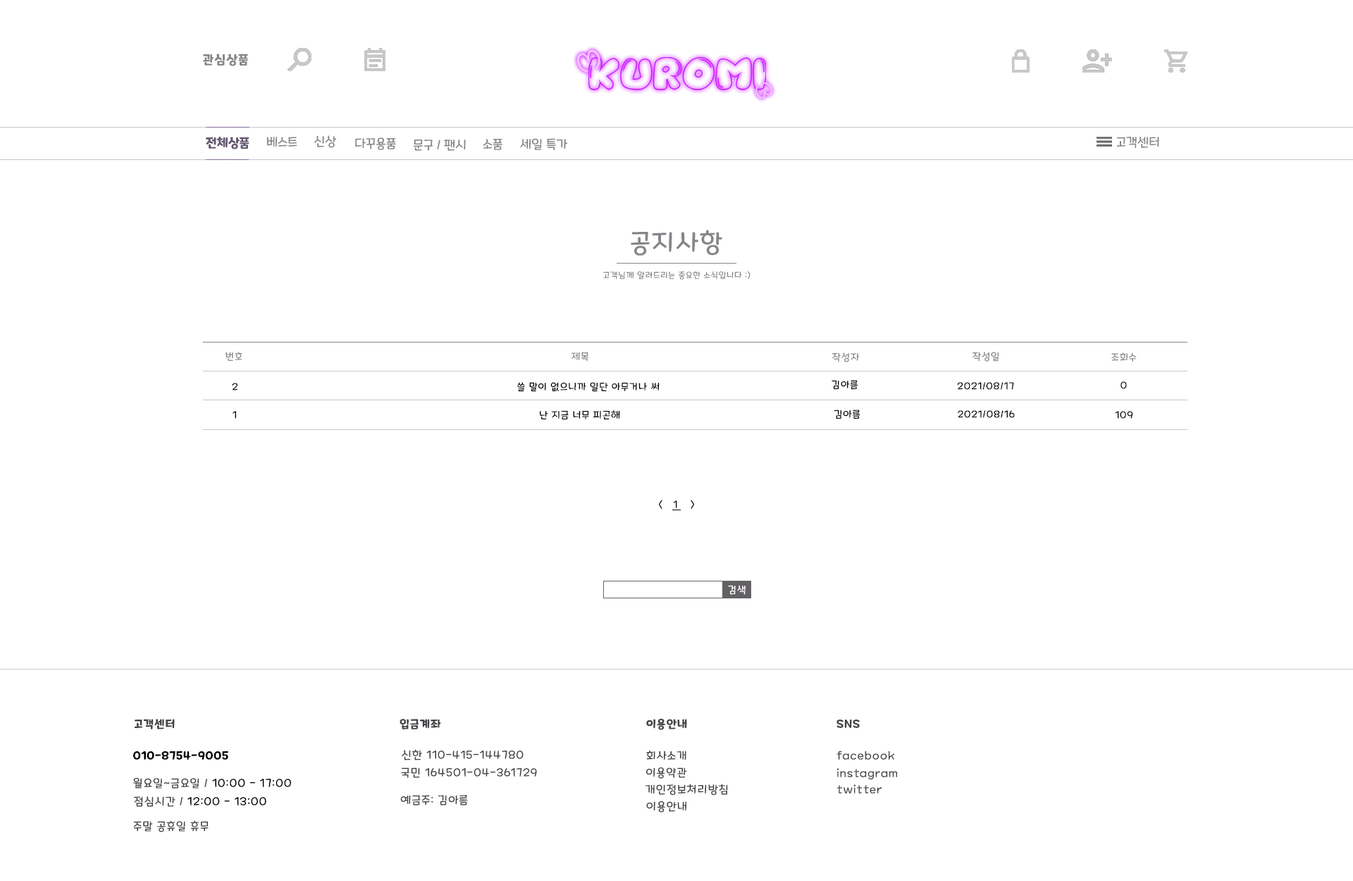
<style>
.page{position:relative;width:1353px;height:881px;background:#ffffff}
.page>*{position:absolute;margin:0}
.t1{font:12.7px "MaplestoryBold";letter-spacing:0.06em;color:#878589}
.t2{font:12.7px "MaplestoryBold";color:#645772}
.t3{font:12.7px "MaplestoryLight";color:#878589}
.t4{font:25.4px "MaplestoryLight";letter-spacing:0.06em;color:#878589}
.t5{font:8.5px "MaplestoryLight";letter-spacing:0.06em;color:#878589}
.t6{font:9.9px "MaplestoryLight";letter-spacing:0.06em;color:#878589}
.t7{font:9.9px "MaplestoryLight";letter-spacing:0.06em;color:#000000}
.t8{font:9.9px "MaplestoryLight";letter-spacing:0.06em;color:#ffffff}
.t9{font:11.3px "MaplestoryBold";letter-spacing:0.06em;color:#464348}
.t10{font:11.3px "MaplestoryLight";letter-spacing:0.06em;color:#464348}
.t11{font:11.3px "MaplestoryBold";letter-spacing:0.06em;color:#000000}
.t12{font:11.3px "MaplestoryLight";letter-spacing:0.06em;color:#000000}
</style>
<div class="page">
<p class="t1" style="left:203px;top:54px;width:45px;height:12px">관심상품</p>
<p class="t2" style="left:206px;top:137px;width:44px;height:12px">전체상품</p>
<p class="t3" style="left:266px;top:137px;width:31px;height:10px">베스트</p>
<p class="t3" style="left:314px;top:135px;width:22px;height:13px">신상</p>
<p class="t3" style="left:355px;top:137px;width:41px;height:13px">다꾸용품</p>
<p class="t3" style="left:1117px;top:137px;width:43px;height:11px">고객센터</p>
<p class="t3" style="left:414px;top:140px;width:52px;height:11px">문구 / 팬시</p>
<p class="t3" style="left:483px;top:139px;width:20px;height:11px">소품</p>
<p class="t3" style="left:520px;top:138px;width:47px;height:12px">세일 특가</p>
<p class="t4" style="left:631px;top:230px;width:91px;height:26px">공지사항</p>
<p class="t5" style="left:603px;top:271px;width:148px;height:9px">고객님께 알려드리는 중요한 소식입니다 :)</p>
<p class="t6" style="left:226px;top:352px;width:16px;height:9px">번호</p>
<p class="t6" style="left:572px;top:352px;width:17px;height:10px">제목</p>
<p class="t6" style="left:832px;top:352px;width:28px;height:10px">작성자</p>
<p class="t6" style="left:973px;top:352px;width:26px;height:10px">작성일</p>
<p class="t6" style="left:1112px;top:352px;width:25px;height:10px">조회수</p>
<p class="t7" style="left:232px;top:383px;width:6px;height:8px">2</p>
<p class="t7" style="left:517px;top:382px;width:143px;height:10px">쓸 말이 없으니까 일단 아무거나 써</p>
<p class="t7" style="left:832px;top:380px;width:26px;height:10px">김아름</p>
<p class="t7" style="left:957px;top:382px;width:57px;height:8px">2021/08/17</p>
<p class="t7" style="left:1121px;top:381px;width:6px;height:8px">0</p>
<p class="t7" style="left:233px;top:411px;width:3px;height:8px">1</p>
<p class="t7" style="left:540px;top:410px;width:80px;height:10px">난 지금 너무 피곤해</p>
<p class="t7" style="left:834px;top:410px;width:27px;height:9px">김아름</p>
<p class="t7" style="left:958px;top:410px;width:57px;height:8px">2021/08/16</p>
<p class="t7" style="left:1115px;top:411px;width:18px;height:8px">109</p>
<p class="t7" style="left:659px;top:500px;width:4px;height:9px">&lt;</p>
<p class="t7" style="left:673px;top:500px;width:4px;height:8px">1</p>
<p class="t7" style="left:691px;top:500px;width:3px;height:9px">&gt;</p>
<p class="t8" style="left:728px;top:585px;width:18px;height:10px">검색</p>
<p class="t9" style="left:134px;top:719px;width:41px;height:11px">고객센터</p>
<p class="t9" style="left:400px;top:719px;width:41px;height:11px">입금계좌</p>
<p class="t9" style="left:646px;top:718px;width:41px;height:12px">이용안내</p>
<p class="t9" style="left:837px;top:720px;width:23px;height:8px">SNS</p>
<p class="t10" style="left:402px;top:749px;width:122px;height:12px">신한 110-415-144780</p>
<p class="t11" style="left:133px;top:751px;width:95px;height:9px">010-8754-9005</p>
<p class="t10" style="left:646px;top:751px;width:41px;height:9px">회사소개</p>
<p class="t10" style="left:837px;top:751px;width:58px;height:9px">facebook</p>
<p class="t10" style="left:401px;top:768px;width:136px;height:10px">국민 164501-04-361729</p>
<p class="t10" style="left:646px;top:767px;width:41px;height:12px">이용약관</p>
<p class="t10" style="left:837px;top:768px;width:61px;height:12px">instagram</p>
<p class="t12" style="left:133px;top:777px;width:158px;height:12px"><span class="t10">월요일~금요일 / </span>10:00 - 17:00</p>
<p class="t10" style="left:646px;top:784px;width:82px;height:11px">개인정보처리방침</p>
<p class="t10" style="left:837px;top:785px;width:46px;height:9px">twitter</p>
<p class="t12" style="left:134px;top:797px;width:132px;height:10px"><span class="t10">점심시간 / </span>12:00 - 13:00</p>
<p class="t10" style="left:400px;top:795px;width:68px;height:11px">예금주: 김아름</p>
<p class="t10" style="left:646px;top:801px;width:41px;height:12px">이용안내</p>
<p class="t10" style="left:133px;top:820px;width:76px;height:12px">주말 공휴일 휴무</p>
</div>
